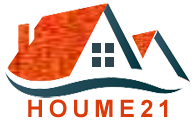
<style>
.page{position:relative;width:194px;height:120px;background:#ffffff}
.page>*{position:absolute;margin:0}
.t1{font:24px "Arial-BoldMT";letter-spacing:0.2em;color:#db3a0a}
</style>
<div class="page">
<p class="t1" style="left:28px;top:99px;width:140px;height:19px">HOUME21</p>
</div>
